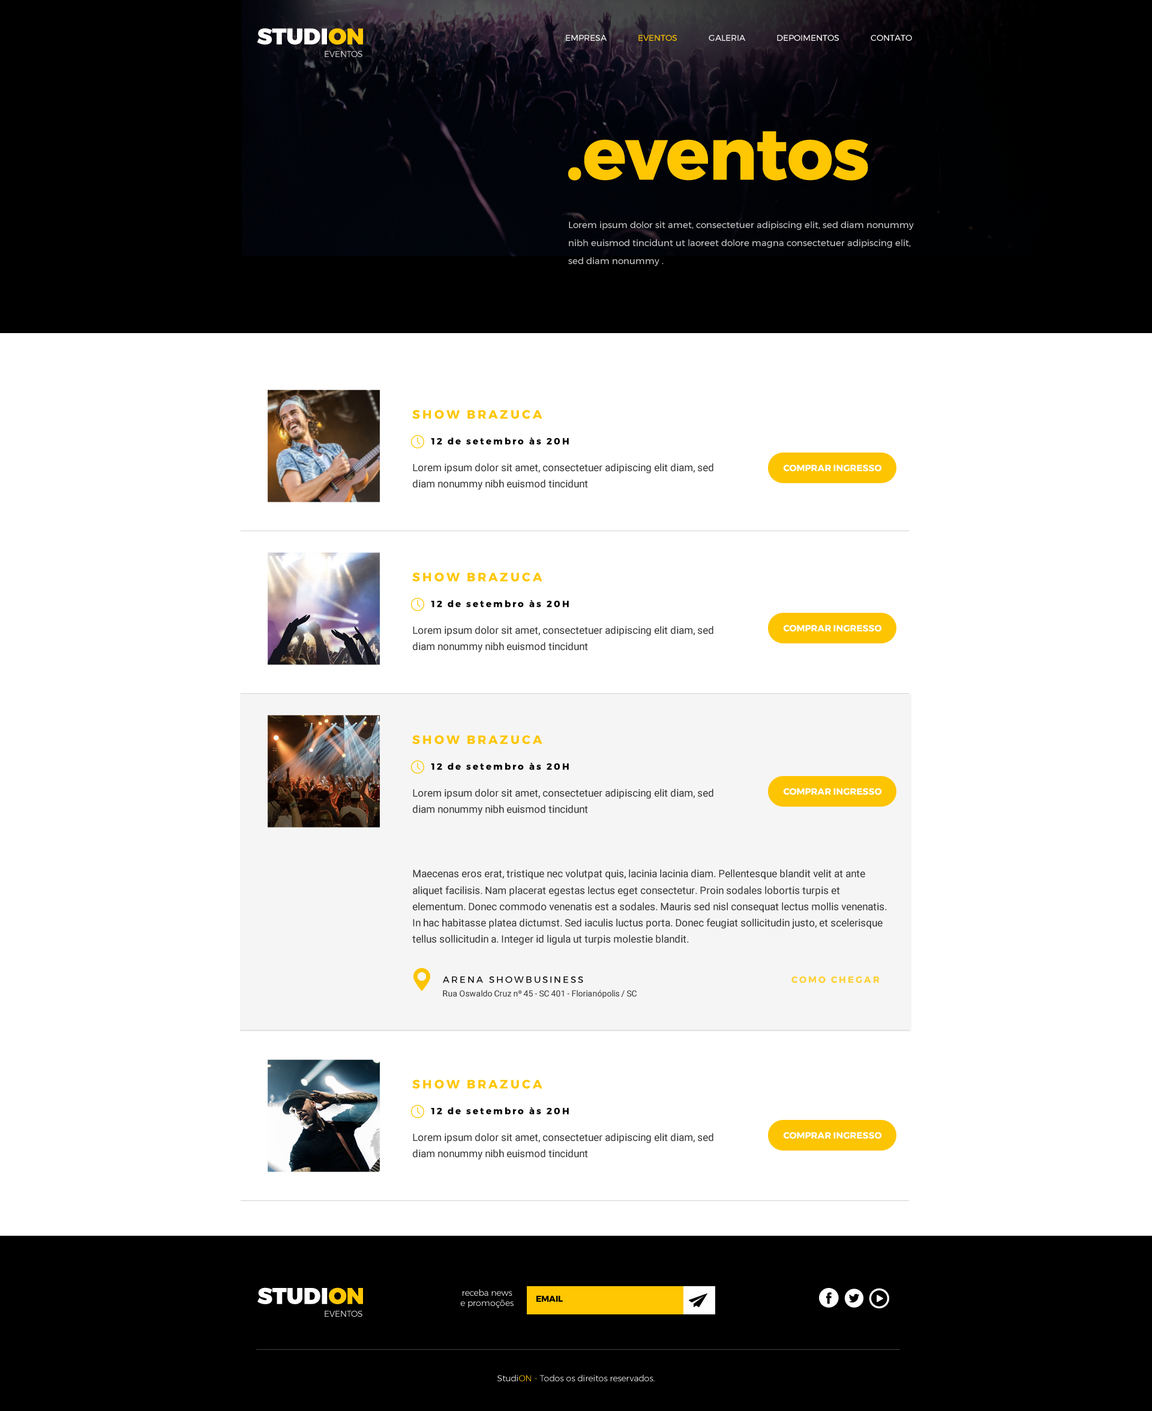
<style>
.page{position:relative;width:1152px;height:1411px;background:#ffffff}
.page>*{position:absolute;margin:0}
.t1{font:22.8px "Montserrat-Black";color:#ffffff}
.t2{font:22.8px "Montserrat-Black";color:#ffc602}
.t3{font:8.4px "Montserrat-Regular";color:#ffffff}
.t4{font:8.4px "Montserrat-Regular";color:#ffc602}
.t5{font:8.4px "Montserrat-Light";color:#ffffff}
.t6{font:72px "Montserrat-Bold";letter-spacing:-0.039em;color:#ffc602;font-weight:bold}
.t7{font:9px/18px "Montserrat-Regular";color:#cccccc}
.t8{font:12px "Montserrat-Bold";letter-spacing:0.2em;color:#ffc602}
.t9{font:9px "Montserrat-Bold";letter-spacing:0.2em;color:#000000}
.t10{font:10.2px/16.3px "Roboto-Regular";color:#333333}
.t11{font:9px "Montserrat-Bold";color:#ffffff}
.t12{font:9px "Montserrat-Regular";letter-spacing:0.2em;color:#000000}
.t13{font:9px "Montserrat-Bold";letter-spacing:0.2em;color:#fdd138}
.t14{font:8.4px "Roboto-Regular";color:#333333}
.t15{font:23px "Montserrat-Black";color:#ffffff}
.t16{font:23px "Montserrat-Black";color:#ffc602}
.t17{font:8.5px/10.2px "Montserrat-Light";color:#ffffff}
.t18{font:8.5px "Montserrat-Bold";color:#000000}
.t19{font:8.5px "Montserrat-Light";color:#ffffff}
.t20{font:8.4px "Montserrat-Light";color:#ffc602}
</style>
<div class="page">
<p class="t1" style="left:257px;top:28px;width:106px;height:17px">STUDI<span class="t2">ON</span></p>
<p class="t3" style="left:566px;top:35px;width:346px;height:6px">EMPRESA             <span class="t4">EVENTOS</span>             GALERIA             DEPOIMENTOS             CONTATO</p>
<p class="t5" style="left:325px;top:51px;width:37px;height:6px">EVENTOS</p>
<p class="t6" style="left:568px;top:131px;width:300px;height:50px">.eventos</p>
<p class="t7" style="left:568px;top:221px;width:346px;height:45px">Lorem ipsum dolor sit amet, consectetuer adipiscing elit, sed diam nonummy nibh euismod tincidunt ut laoreet dolore magna consectetuer adipiscing elit, sed diam nonummy .</p>
<p class="t8" style="left:412px;top:410px;width:130px;height:9px">SHOW BRAZUCA</p>
<p class="t9" style="left:431px;top:437px;width:138px;height:8px">12 de setembro às 20H</p>
<p class="t10" style="left:413px;top:463px;width:300px;height:27px">Lorem ipsum dolor sit amet, consectetuer adipiscing elit diam, sed diam nonummy nibh euismod tincidunt</p>
<p class="t11" style="left:783px;top:464px;width:99px;height:8px">COMPRAR INGRESSO</p>
<p class="t8" style="left:412px;top:572px;width:130px;height:9px">SHOW BRAZUCA</p>
<p class="t9" style="left:431px;top:600px;width:138px;height:7px">12 de setembro às 20H</p>
<p class="t10" style="left:413px;top:626px;width:300px;height:26px">Lorem ipsum dolor sit amet, consectetuer adipiscing elit diam, sed diam nonummy nibh euismod tincidunt</p>
<p class="t11" style="left:783px;top:625px;width:99px;height:7px">COMPRAR INGRESSO</p>
<p class="t8" style="left:412px;top:735px;width:130px;height:9px">SHOW BRAZUCA</p>
<p class="t9" style="left:431px;top:763px;width:138px;height:7px">12 de setembro às 20H</p>
<p class="t10" style="left:413px;top:788px;width:300px;height:27px">Lorem ipsum dolor sit amet, consectetuer adipiscing elit diam, sed diam nonummy nibh euismod tincidunt</p>
<p class="t11" style="left:783px;top:788px;width:99px;height:7px">COMPRAR INGRESSO</p>
<p class="t10" style="left:412px;top:869px;width:475px;height:75px">Maecenas eros erat, tristique nec volutpat quis, lacinia lacinia diam. Pellentesque blandit velit at ante aliquet facilisis. Nam placerat egestas lectus eget consectetur. Proin sodales lobortis turpis et elementum. Donec commodo venenatis est a sodales. Mauris sed nisl consequat lectus mollis venenatis. In hac habitasse platea dictumst. Sed iaculis luctus porta. Donec feugiat sollicitudin justo, et scelerisque tellus sollicitudin a. Integer id ligula ut turpis molestie blandit.</p>
<p class="t12" style="left:443px;top:976px;width:140px;height:7px">ARENA SHOWBUSINESS</p>
<p class="t13" style="left:791px;top:976px;width:89px;height:7px">COMO CHEGAR</p>
<p class="t14" style="left:443px;top:989px;width:194px;height:9px">Rua Oswaldo Cruz nº 45 - SC 401 - Florianópolis / SC</p>
<p class="t8" style="left:412px;top:1079px;width:130px;height:9px">SHOW BRAZUCA</p>
<p class="t9" style="left:431px;top:1107px;width:138px;height:7px">12 de setembro às 20H</p>
<p class="t10" style="left:413px;top:1133px;width:300px;height:26px">Lorem ipsum dolor sit amet, consectetuer adipiscing elit diam, sed diam nonummy nibh euismod tincidunt</p>
<p class="t11" style="left:783px;top:1132px;width:99px;height:7px">COMPRAR INGRESSO</p>
<p class="t15" style="left:257px;top:1287px;width:106px;height:17px">STUDI<span class="t16">ON</span></p>
<p class="t17" style="left:460px;top:1289px;width:54px;height:18px;text-align:center">receba news<br>e promoções</p>
<p class="t18" style="left:536px;top:1295px;width:27px;height:6px">EMAIL</p>
<p class="t19" style="left:325px;top:1310px;width:37px;height:6px">EVENTOS</p>
<p class="t5" style="left:497px;top:1374px;width:158px;height:7px">Studi<span class="t20">ON - </span>Todos os direitos reservados.</p>
</div>
